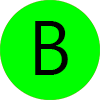
<style>
.page{position:relative;width:100px;height:100px;background:#00ff00}
.page>*{position:absolute;margin:0}
.t1{font:75px "MalgunGothicRegular";color:#000000}
</style>
<div class="page">
<p class="t1" style="left:35px;top:21px;width:33px;height:54px">B</p>
</div>
